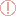
<style>
.page{position:relative;width:16px;height:16px;background:#ffffff}
.page>*{position:absolute;margin:0}
.t1{font:17px "Helvetica-Bold";color:#e0a69f}
</style>
<div class="page">
<p class="t1" style="left:7px;top:2px;width:2px;height:12px">!</p>
</div>
